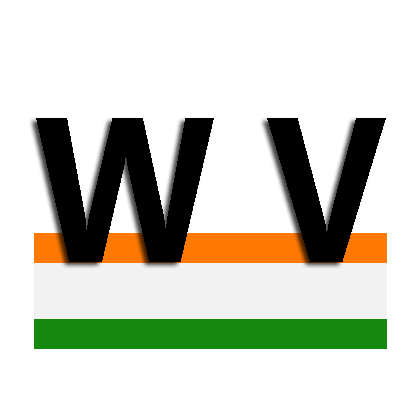
<style>
.page{position:relative;width:420px;height:420px;background:#ffffff}
.page>*{position:absolute;margin:0}
.t1{font:204.6px "SegoeUI-Bold";color:#000000;scale:0.89 1}
</style>
<div class="page">
<p class="t1" style="left:36px;top:118px;width:350px;height:144px">W V</p>
</div>
